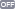
<style>
.page{position:relative;width:15px;height:9px;background:#858796}
.page>*{position:absolute;margin:0}
.t1{font:7px "ArialMT";letter-spacing:-0.01em;color:#ffffff}
</style>
<div class="page">
<p class="t1" style="left:1px;top:2px;width:14px;height:5px">OFF</p>
</div>
